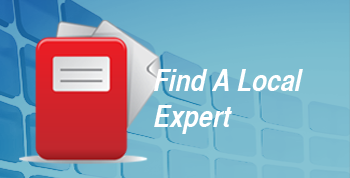
<style>
.page{position:relative;width:350px;height:178px}
.page>*{position:absolute;margin:0}
.t1{font:30px "HelveticaCYBoldOblique";color:#ffffff}
</style>
<div class="page">
<p class="t1" style="left:154px;top:69px;width:149px;height:65px">Find A Local<br>Expert</p>
</div>
